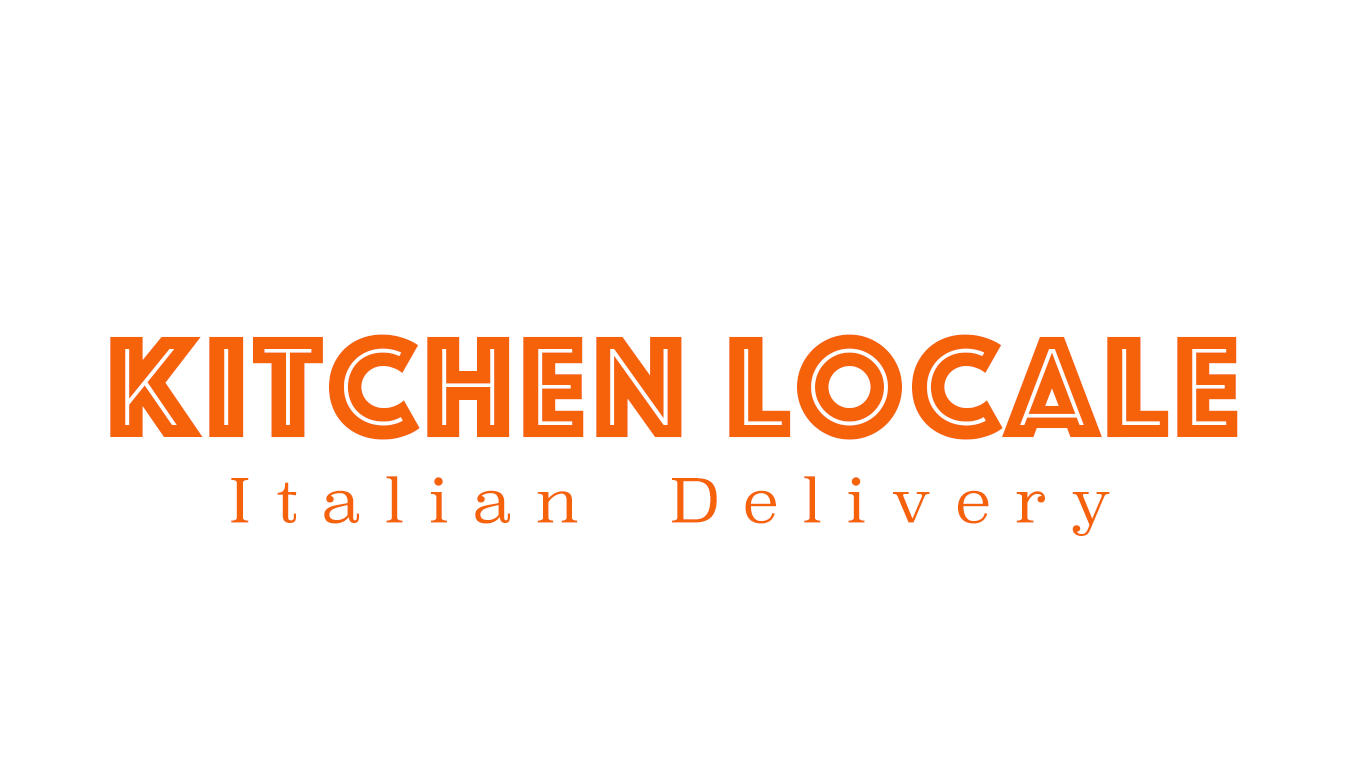
<style>
.page{position:relative;width:1366px;height:768px;background:#ffffff}
.page>*{position:absolute;margin:0}
.t1{font:150px "Phosphate-Inline";letter-spacing:0.025em;color:#f56209}
.t2{font:60px "Superclarendon-Light";letter-spacing:0.025em;color:#f56209}
</style>
<div class="page">
<p class="t1" style="left:110px;top:334px;width:1128px;height:106px">Kitchen Locale</p>
<p class="t2" style="left:231px;top:476px;width:879px;height:60px">I t a l i a n    D e l i v e r y</p>
</div>
